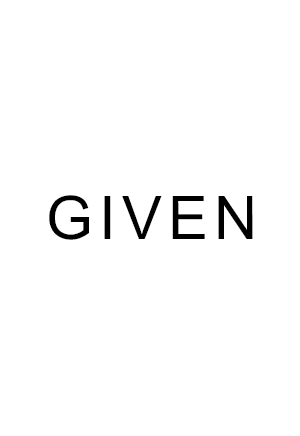
<style>
.page{position:relative;width:300px;height:436px;background:#ffffff}
.page>*{position:absolute;margin:0}
.t1{font:60px "ArialMT";letter-spacing:0.1em;color:#000000}
</style>
<div class="page">
<p class="t1" style="left:49px;top:195px;width:204px;height:45px">GIVEN</p>
</div>
